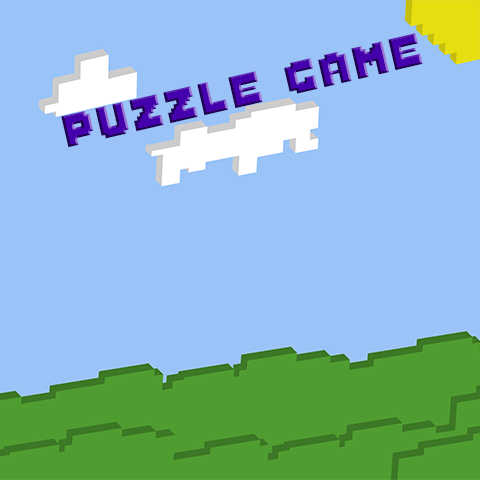
<style>
.page{position:relative;width:480px;height:480px;background:#9ac4f7}
.page>*{position:absolute;margin:0}
.t1{font:46.7px "Sabo-Filled"}
</style>
<div class="page">
<p class="t1" style="left:61px;top:33px;width:362px;height:115px;rotate:-13deg">Puzzle Game</p>
</div>
